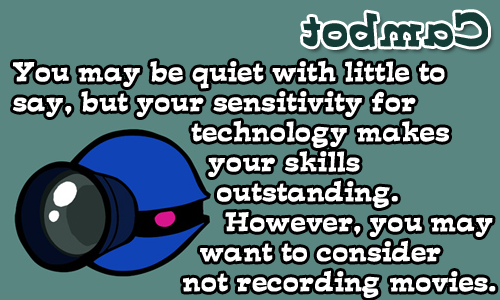
<style>
.page{position:relative;width:500px;height:300px;background:#598681}
.page>*{position:absolute;margin:0}
.t1{font:41.7px "d......";color:#133c37;font-weight:bold}
.t2{font:25px "d......";color:#ffffff;font-weight:bold}
</style>
<div class="page">
<p class="t1" style="left:303px;top:12px;width:185px;height:35px;rotate:180deg">Cambot</p>
<p class="t2" style="left:13px;top:60px;width:483px;height:238px">You may be quiet with little to <br>say, but your sensitivity for <br>                     technology makes<br>                       your skills <br>                        outstanding. <br>                         However, you may<br>                      want to consider<br>                    not recording movies.</p>
</div>
